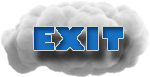
<style>
.page{position:relative;width:150px;height:77px;background:#ffffff}
.page>*{position:absolute;margin:0}
.t1{font:29.6px "GillSans-UltraBold";letter-spacing:0.04em;font-weight:bold}
</style>
<div class="page">
<p class="t1" style="left:34px;top:27px;width:89px;height:23px">EXIT</p>
</div>
